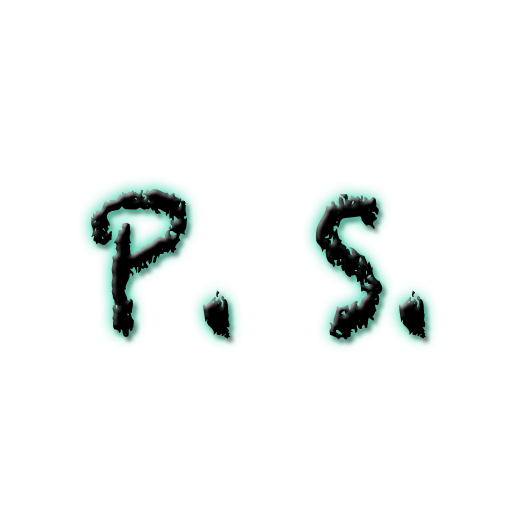
<style>
.page{position:relative;width:512px;height:512px;background:#ffffff}
.page>*{position:absolute;margin:0}
.t1{font:177.4px "Chalkduster";color:#000000;scale:0.83 1}
</style>
<div class="page">
<p class="t1" style="left:91px;top:189px;width:335px;height:151px">P. S.</p>
</div>
